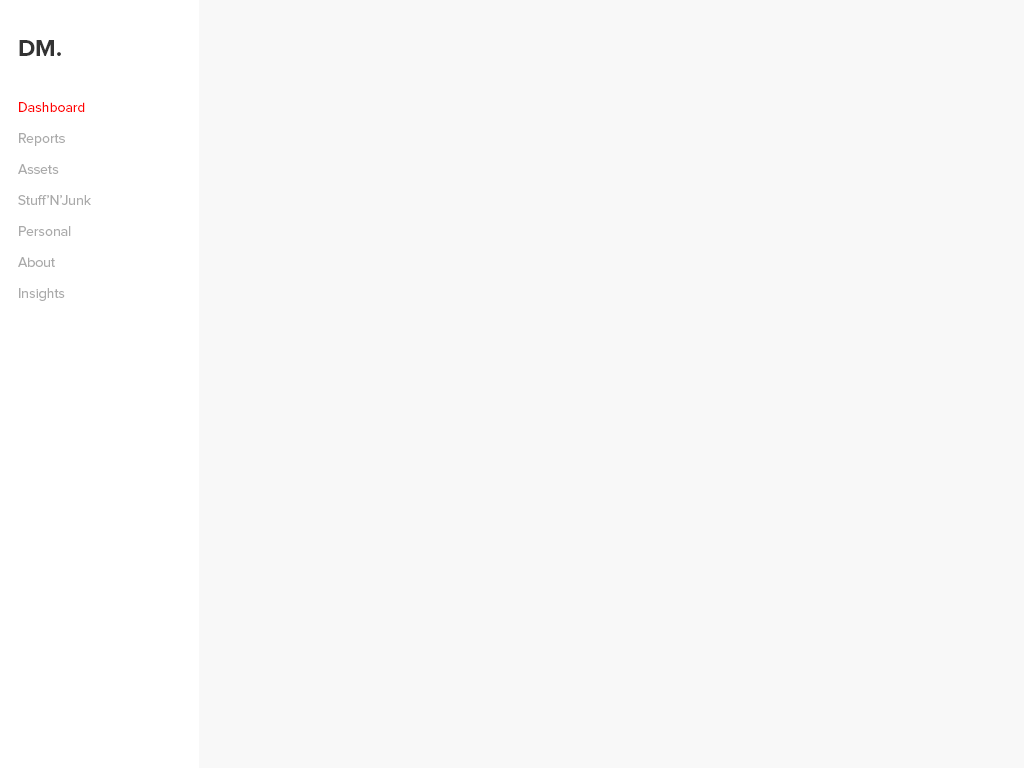
<style>
.page{position:relative;width:1024px;height:768px;background:#f8f8f8}
.page>*{position:absolute;margin:0}
.t1{font:24px "ProximaNova-Bold";color:#333333}
.t2{font:14px "ProximaNova-Regular";color:#ff0101}
.t3{font:14px "ProximaNova-Regular";color:#aaaaaa}
</style>
<div class="page">
<p class="t1" style="left:19px;top:40px;width:42px;height:16px">DM.</p>
<p class="t2" style="left:19px;top:102px;width:66px;height:10px">Dashboard</p>
<p class="t3" style="left:19px;top:133px;width:46px;height:13px">Reports</p>
<p class="t3" style="left:18px;top:164px;width:41px;height:10px">Assets</p>
<p class="t3" style="left:18px;top:195px;width:73px;height:10px">Stuff’N’Junk</p>
<p class="t3" style="left:19px;top:226px;width:52px;height:10px">Personal</p>
<p class="t3" style="left:18px;top:257px;width:37px;height:10px">About</p>
<p class="t3" style="left:19px;top:288px;width:46px;height:13px">Insights</p>
</div>
